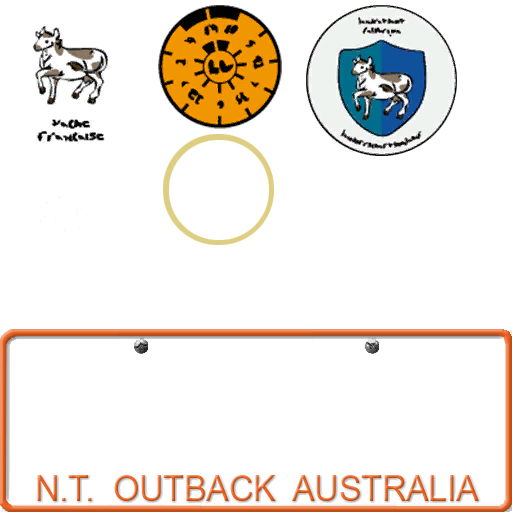
<style>
.page{position:relative;width:512px;height:512px;background:#ffffff}
.page>*{position:absolute;margin:0}
.t1{font:35.7px "ArialMT";scale:0.94 1}
</style>
<div class="page">
<p class="t1" style="left:37px;top:475px;width:442px;height:26px">N.T.  OUTBACK  AUSTRALIA</p>
</div>
